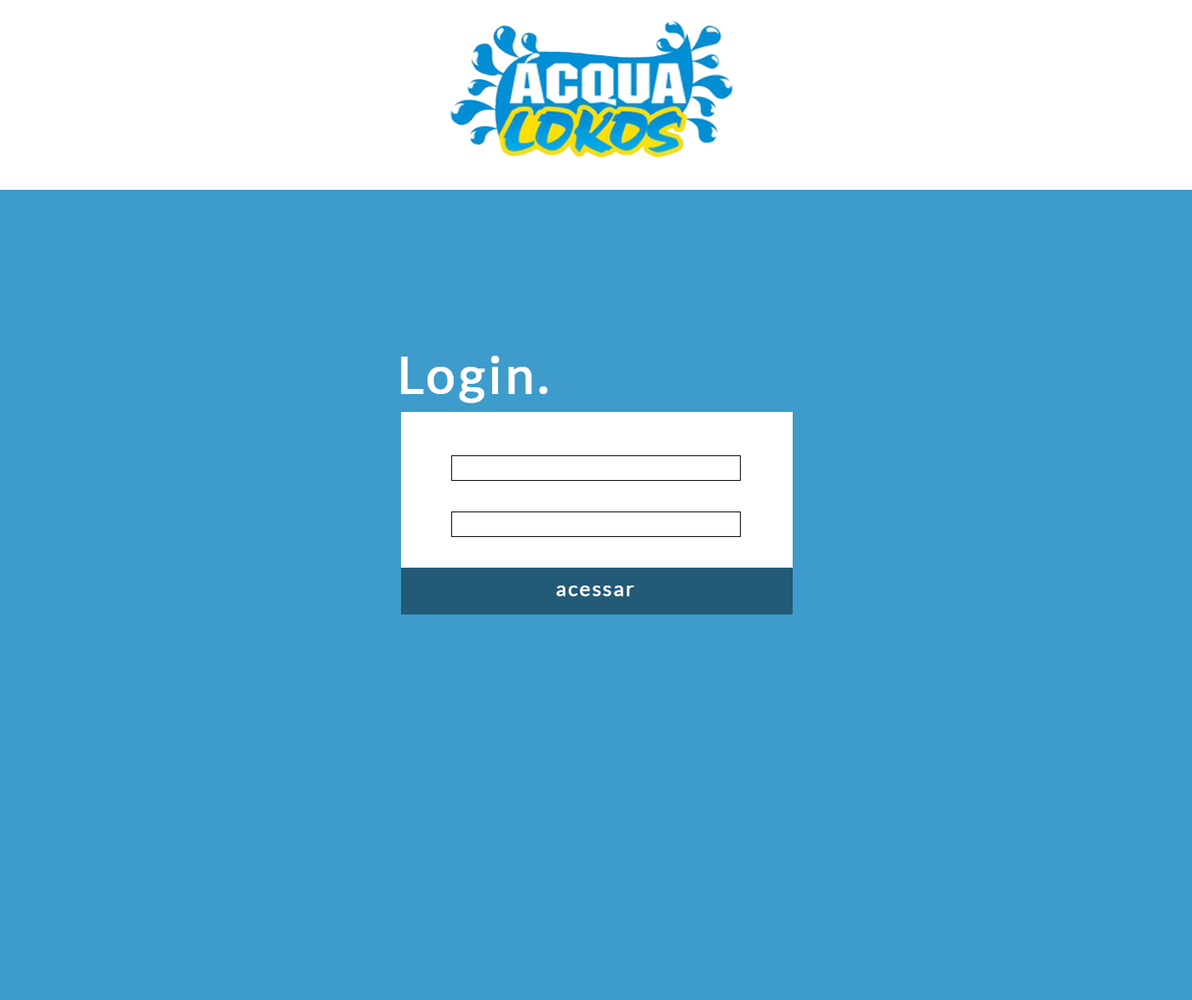
<style>
.page{position:relative;width:1192px;height:1000px;background:#3d9ccb}
.page>*{position:absolute;margin:0}
.t1{font:51.1px "Lato-Regular";letter-spacing:0.05em;color:#ffffff;font-weight:bold}
.t2{font:20.4px "Lato-Regular";letter-spacing:0.05em;color:#ffffff;font-weight:bold}
</style>
<div class="page">
<p class="t1" style="left:401px;top:356px;width:146px;height:48px">Login.</p>
<p class="t2" style="left:556px;top:586px;width:78px;height:11px">acessar</p>
</div>
